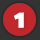
<style>
.page{position:relative;width:40px;height:40px;background:#c1272c}
.page>*{position:absolute;margin:0}
.t1{font:22.9px "TitilliumWeb-Black";color:#ffffff}
</style>
<div class="page">
<p class="t1" style="left:14px;top:12px;width:10px;height:16px;rotate:-1deg">1</p>
</div>
